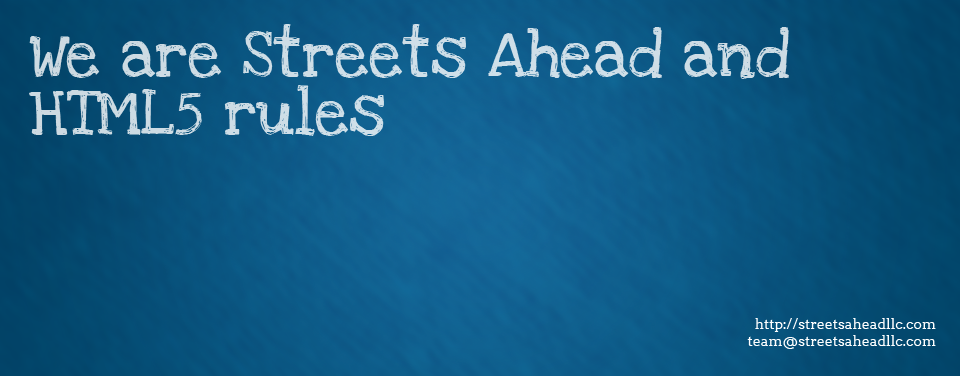
<style>
.page{position:relative;width:960px;height:376px}
.page>*{position:absolute;margin:0}
.t1{font:48px "LoveYaLikeASister";color:#cedde6}
.t2{font:14px "Arvo";color:#ffffff}
</style>
<div class="page">
<p class="t1" style="left:29px;top:24px;width:760px;height:112px">We are Streets Ahead and <br>HTML5 rules</p>
<p class="t2" style="left:747px;top:318px;width:189px;height:31px;text-align:right">http://streetsaheadllc.com<br>team@streetsaheadllc.com</p>
</div>
